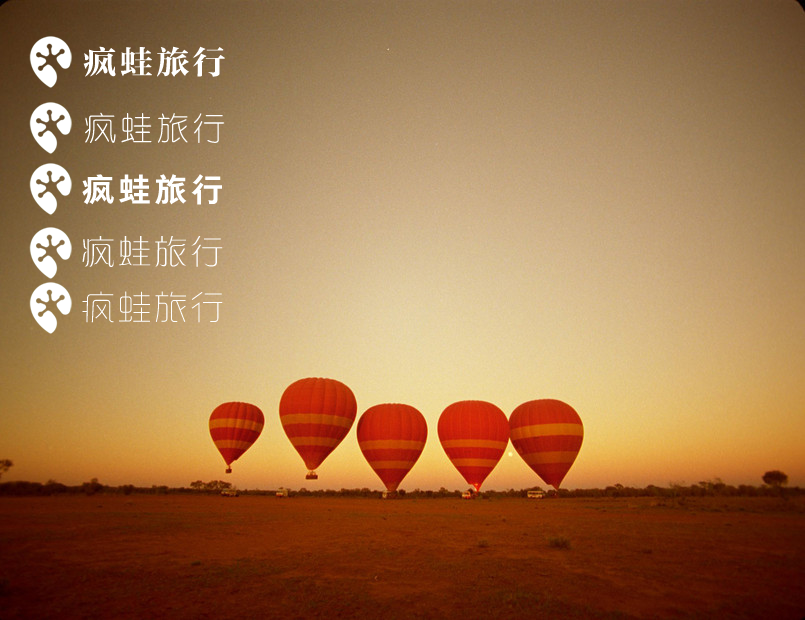
<style>
.page{position:relative;width:805px;height:620px}
.page>*{position:absolute;margin:0}
.t1{font:33.2px "FZCYSK--GBK1-0";letter-spacing:0.1em;color:#ffffff}
.t2{font:33px "CloudYuanXiGBK";letter-spacing:0.1em;color:#ffffff}
.t3{font:33px "FZYOUH_CUJW--GB1-0";letter-spacing:0.1em;color:#ffffff}
.t4{font:33px "GJJXQJW--GB1-0";letter-spacing:0.1em;color:#ffffff}
.t5{font:33px "MFYueHei_Noncommercial-ExLight";letter-spacing:0.1em;color:#ffffff}
</style>
<div class="page">
<p class="t1" style="left:83px;top:46px;width:142px;height:31px">疯蛙旅行</p>
<p class="t2" style="left:85px;top:112px;width:140px;height:31px">疯蛙旅行</p>
<p class="t3" style="left:82px;top:174px;width:140px;height:31px">疯蛙旅行</p>
<p class="t4" style="left:82px;top:236px;width:141px;height:31px">疯蛙旅行</p>
<p class="t5" style="left:82px;top:291px;width:141px;height:32px">疯蛙旅行</p>
</div>
